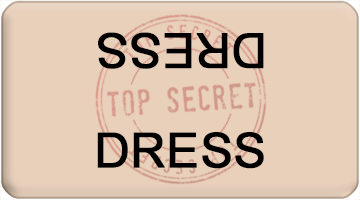
<style>
.page{position:relative;width:360px;height:200px;background:#e8d0bb}
.page>*{position:absolute;margin:0}
.t1{font:48px "ArialMT";color:#000000;font-weight:bold}
</style>
<div class="page">
<p class="t1" style="left:98px;top:32px;width:166px;height:37px;rotate:180deg">DRESS</p>
<p class="t1" style="left:97px;top:132px;width:167px;height:37px">DRESS</p>
</div>
